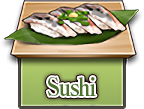
<style>
.page{position:relative;width:144px;height:109px}
.page>*{position:absolute;margin:0}
.t1{font:25px "RyuminPro-ExBold";letter-spacing:-0.08em;color:#4c6f2a;scale:0.9 1}
</style>
<div class="page">
<p class="t1" style="left:47px;top:77px;width:49px;height:20px">Sushi</p>
</div>
